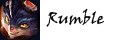
<style>
.page{position:relative;width:140px;height:40px;background:#ffffff}
.page>*{position:absolute;margin:0}
.t1{font:12px "VinerHandITC";color:#000000}
</style>
<div class="page">
<p class="t1" style="left:46px;top:8px;width:58px;height:19px">Rumble</p>
</div>
